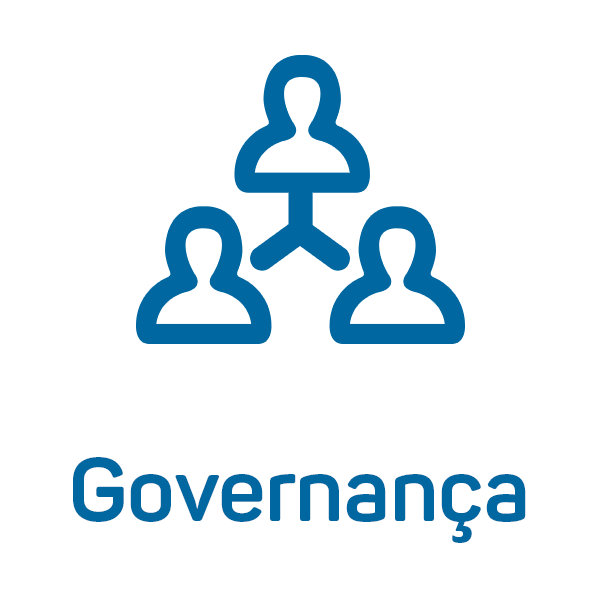
<style>
.page{position:relative;width:600px;height:600px;background:#ffffff}
.page>*{position:absolute;margin:0}
.t1{font:88.1px "Panton-Bold";color:#0067a0}
</style>
<div class="page">
<p class="t1" style="left:73px;top:457px;width:453px;height:86px">Governança</p>
</div>
